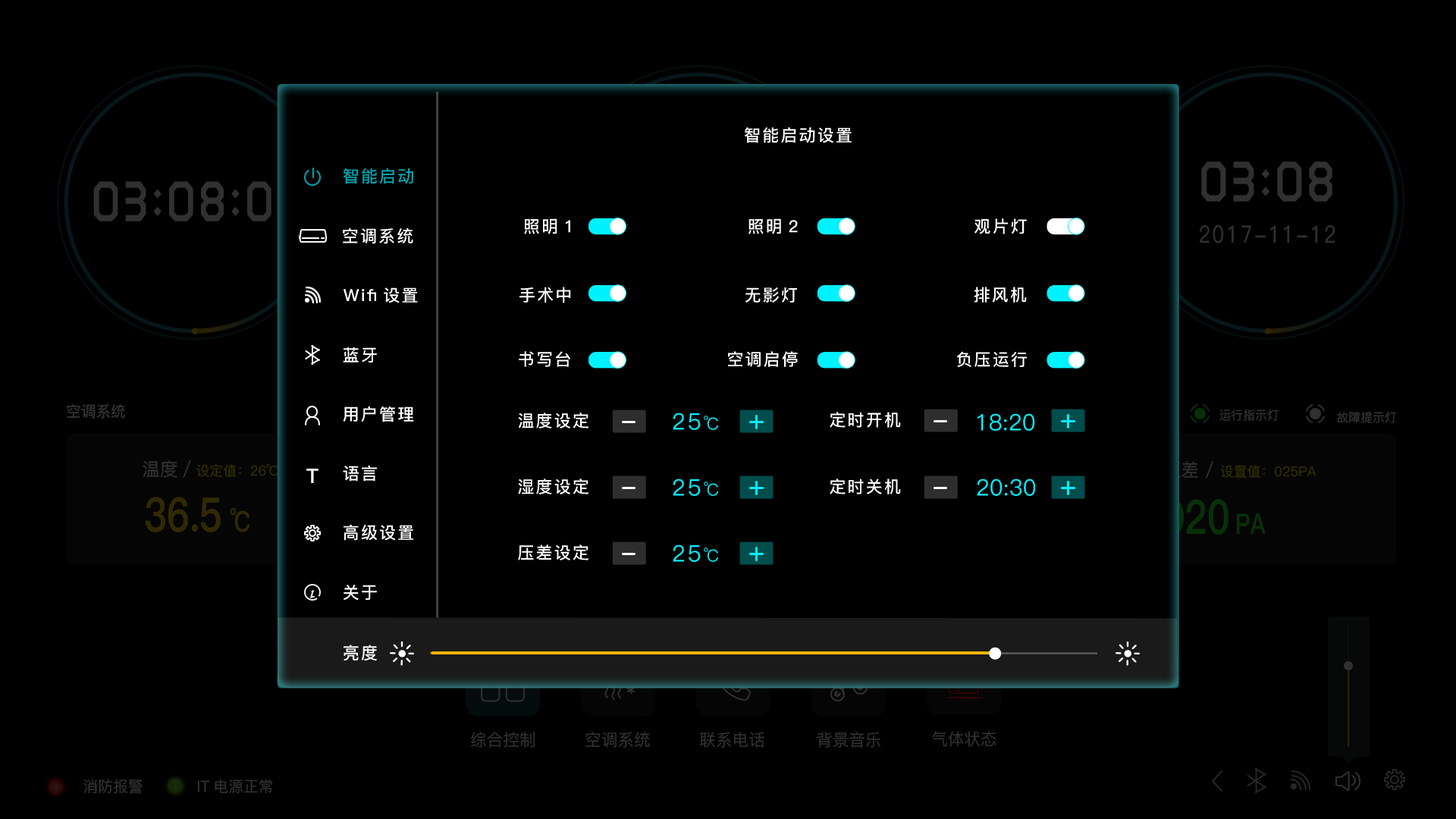
<style>
.page{position:relative;width:1456px;height:819px;background:#000000}
.page>*{position:absolute;margin:0}
.t1{font:16.7px "PingFang-SC-Bold";letter-spacing:0.1em;color:#ffffff}
.t2{font:16.7px "PingFang-SC-Bold";letter-spacing:0.1em;color:#00a5af}
.t3{font:22.7px "PingFang-SC-Medium";letter-spacing:0.1em;color:#00f1ff}
.t4{font:16.7px "PingFang-SC-Medium";letter-spacing:0.1em;color:#00f1ff}
.t5{font:22.7px "PingFang-SC-Medium";color:#00f1ff}
.t6{font:19.8px "PingFang-SC-Heavy";letter-spacing:0.1em;color:#ffffff}
</style>
<div class="page">
<p class="t1" style="left:744px;top:127px;width:108px;height:16px">智能启动设置</p>
<p class="t2" style="left:343px;top:168px;width:70px;height:16px">智能启动</p>
<p class="t1" style="left:524px;top:218px;width:46px;height:16px">照明1</p>
<p class="t1" style="left:748px;top:218px;width:50px;height:16px">照明2</p>
<p class="t1" style="left:974px;top:218px;width:53px;height:16px">观片灯</p>
<p class="t1" style="left:343px;top:227px;width:70px;height:17px">空调系统</p>
<p class="t1" style="left:344px;top:287px;width:74px;height:16px">Wifi设置</p>
<p class="t1" style="left:519px;top:287px;width:52px;height:16px">手术中</p>
<p class="t1" style="left:745px;top:287px;width:52px;height:16px">无影灯</p>
<p class="t1" style="left:974px;top:287px;width:53px;height:16px">排风机</p>
<p class="t1" style="left:343px;top:347px;width:34px;height:15px">蓝牙</p>
<p class="t1" style="left:519px;top:351px;width:52px;height:16px">书写台</p>
<p class="t1" style="left:728px;top:351px;width:70px;height:16px">空调启停</p>
<p class="t1" style="left:956px;top:351px;width:71px;height:16px">负压运行</p>
<p class="t1" style="left:343px;top:406px;width:71px;height:16px">用户管理</p>
<p class="t1" style="left:518px;top:413px;width:70px;height:15px">温度设定</p>
<p class="t3" style="left:673px;top:413px;width:45px;height:17px">25<span class="t4">℃</span></p>
<p class="t1" style="left:830px;top:412px;width:71px;height:16px">定时开机</p>
<p class="t5" style="left:977px;top:413px;width:58px;height:18px">18:20</p>
<p class="t6" style="left:306px;top:469px;width:12px;height:14px">T</p>
<p class="t1" style="left:343px;top:465px;width:34px;height:17px">语言</p>
<p class="t1" style="left:518px;top:479px;width:70px;height:15px">湿度设定</p>
<p class="t3" style="left:673px;top:479px;width:45px;height:17px">25<span class="t4">℃</span></p>
<p class="t1" style="left:830px;top:479px;width:71px;height:15px">定时关机</p>
<p class="t5" style="left:977px;top:479px;width:59px;height:17px">20:30</p>
<p class="t1" style="left:344px;top:524px;width:70px;height:17px">高级设置</p>
<p class="t1" style="left:518px;top:544px;width:70px;height:16px">压差设定</p>
<p class="t3" style="left:673px;top:544px;width:45px;height:18px">25<span class="t4">℃</span></p>
<p class="t1" style="left:344px;top:585px;width:33px;height:16px">关于</p>
<p class="t1" style="left:344px;top:645px;width:33px;height:16px">亮度</p>
</div>
